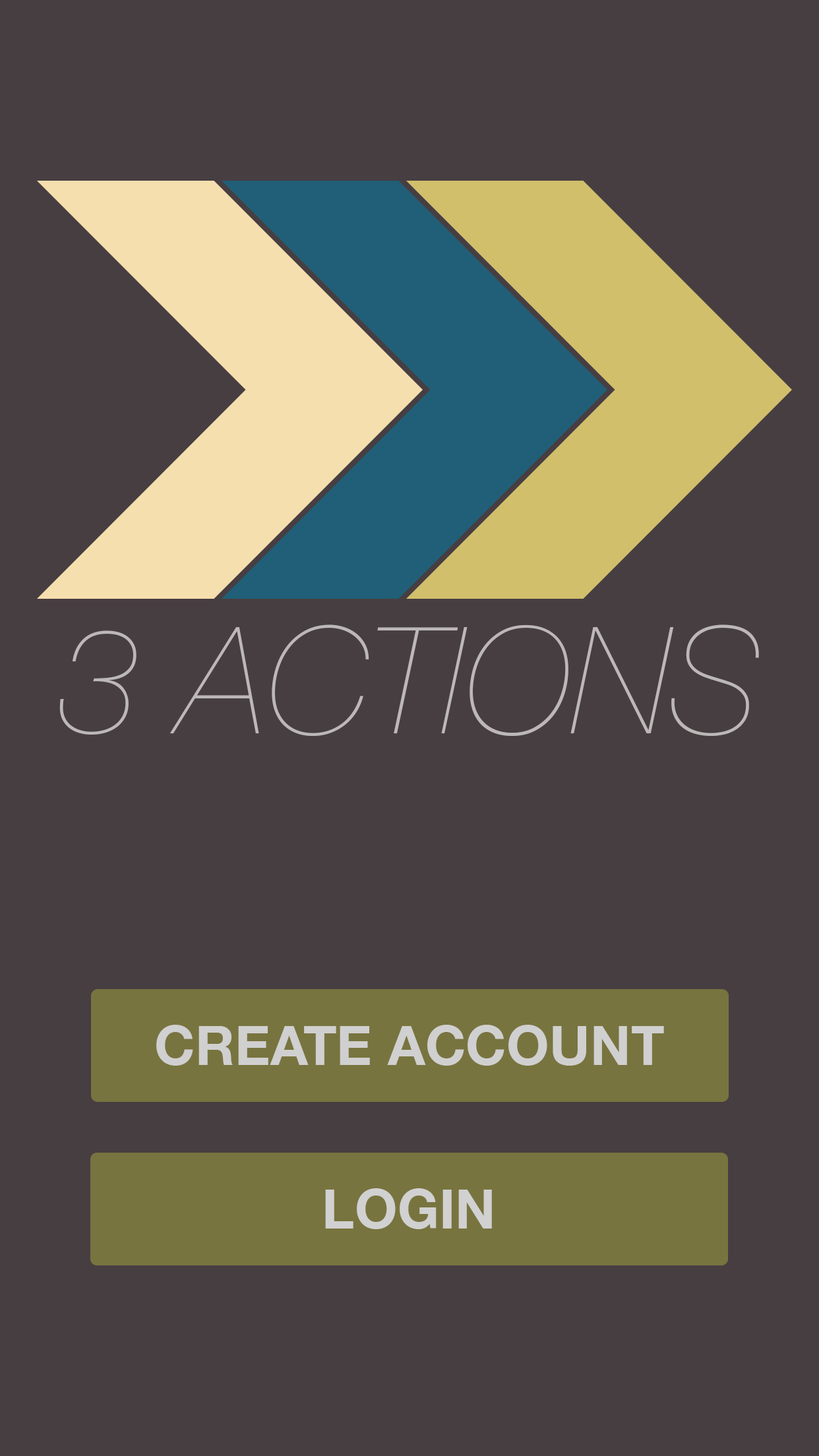
<style>
.page{position:relative;width:819px;height:1456px;background:#473e42}
.page>*{position:absolute;margin:0}
.t1{font:148.4px "HelveticaNeue-UltraLightItalic";color:#bdb8b8}
.t2{font:55px "HelveticaNeue-Bold";color:#d1d1d1}
</style>
<div class="page">
<p class="t1" style="left:59px;top:624px;width:700px;height:112px">3 ACTIONS</p>
<p class="t2" style="left:156px;top:1025px;width:508px;height:41px">CREATE ACCOUNT</p>
<p class="t2" style="left:325px;top:1188px;width:167px;height:41px">LOGIN</p>
</div>
